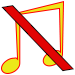
<style>
.page{position:relative;width:75px;height:75px;background:#ffffff}
.page>*{position:absolute;margin:0}
.t1{font:101.5px "MyriadPro-Regular";color:#e20404;scale:1.67 1}
</style>
<div class="page">
<p class="t1" style="left:1px;top:5px;width:74px;height:67px;rotate:-10deg">\</p>
</div>
